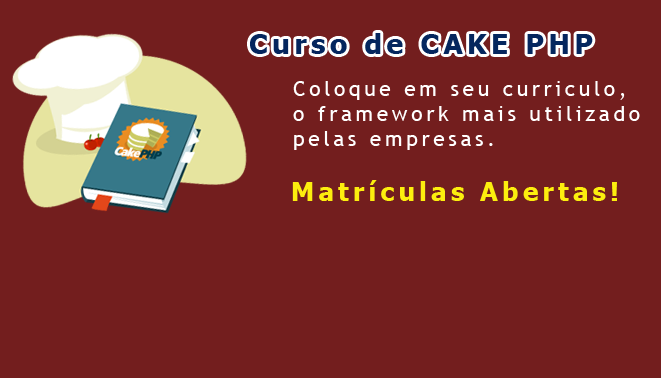
<style>
.page{position:relative;width:661px;height:378px;background:#731e1e}
.page>*{position:absolute;margin:0}
.t1{font:28px "Tahoma-Bold";letter-spacing:0.16em;color:#04265e}
.t2{font:21px "TrebuchetMS";letter-spacing:0.16em;color:#ffffff}
.t3{font:26px "Tahoma-Bold";letter-spacing:0.16em;color:#fcee0e}
</style>
<div class="page">
<p class="t1" style="left:250px;top:33px;width:343px;height:21px">Curso de CAKE PHP</p>
<p class="t2" style="left:293px;top:81px;width:347px;height:69px">Coloque em seu curriculo,<br>o framework mais utilizado<br>pelas empresas.</p>
<p class="t3" style="left:292px;top:180px;width:325px;height:21px">Matrículas Abertas!</p>
</div>
